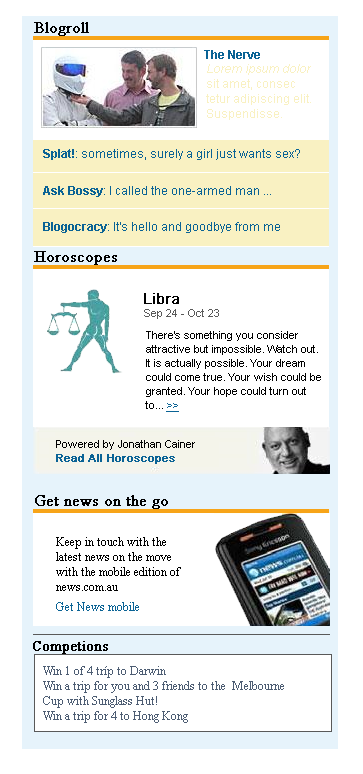
<style>
.page{position:relative;width:363px;height:774px;background:#ffffff}
.page>*{position:absolute;margin:0}
.t1{font:16px "TimesNewRomanPSMT";color:#000000;font-weight:bold}
.t2{font:12px "Arial-BoldMT";color:#0a6395}
.t3{font:12px/15px "ArialMT";color:#f9f1c2}
.t4{font:12px/15px "Arial-ItalicMT";color:#f9f1c2}
.t5{font:12px "ArialMT";color:#0a6395}
.t6{font:15px "ArialMT";color:#000000;font-weight:bold}
.t7{font:11px "ArialMT";color:#595959}
.t8{font:11px/14px "ArialMT";color:#000000}
.t9{font:11px/14px "ArialMT";color:#0a6395;text-decoration:underline}
.t10{font:11px/14px "ArialMT";color:#0a6395;font-weight:bold}
.t11{font:12px/15px "TimesNewRomanPSMT";color:#000000}
.t12{font:12px "TimesNewRomanPSMT";color:#0a6395}
.t13{font:14px "TimesNewRomanPSMT";color:#000000;font-weight:bold}
.t14{font:12px/15px "TimesNewRomanPSMT";color:#4d5d73}
</style>
<div class="page">
<p class="t1" style="left:34px;top:22px;width:55px;height:14px">Blogroll</p>
<p class="t2" style="left:204px;top:50px;width:56px;height:9px">The Nerve</p>
<p class="t3" style="left:206px;top:64px;width:105px;height:56px"><span class="t4">Lorem ipsum dolor <br></span>sit amet, consec<br>tetur adipiscing elit. <br>Suspendisse.</p>
<p class="t5" style="left:43px;top:149px;width:257px;height:11px"><span class="t2">Splat!</span>: sometimes, surely a girl just wants sex?</p>
<p class="t5" style="left:43px;top:186px;width:228px;height:11px"><span class="t2">Ask Bossy</span>: I called the one-armed man ...</p>
<p class="t5" style="left:43px;top:222px;width:237px;height:11px"><span class="t2">Blogocracy</span>: It’s hello and goodbye from me</p>
<p class="t1" style="left:34px;top:251px;width:83px;height:14px">Horoscopes</p>
<p class="t6" style="left:144px;top:293px;width:35px;height:11px">Libra</p>
<p class="t7" style="left:144px;top:309px;width:75px;height:10px">Sep 24 - Oct 23</p>
<p class="t8" style="left:145px;top:331px;width:176px;height:81px">There’s something you consider<br>attractive but impossible. Watch out.<br>It is actually possible. Your dream<br>could come true. Your wish could be<br>granted. Your hope could turn out <br>to... <span class="t9">&gt;&gt;</span></p>
<p class="t8" style="left:56px;top:440px;width:139px;height:24px">Powered by Jonathan Cainer<br><span class="t10">Read All Horoscopes</span></p>
<p class="t1" style="left:35px;top:495px;width:133px;height:14px">Get news on the go</p>
<p class="t11" style="left:56px;top:537px;width:125px;height:54px">Keep in touch with the <br>latest news on the move <br>with the mobile edition of <br>news.com.au</p>
<p class="t12" style="left:56px;top:602px;width:83px;height:9px">Get News mobile</p>
<p class="t13" style="left:33px;top:641px;width:75px;height:13px">Competions</p>
<p class="t14" style="left:43px;top:666px;width:241px;height:57px">Win 1 of 4 tríp to Darwin<br>Win a trip for you and 3 friends to the  Melbourne<br>Cup with Sunglass Hut!<br>Win a trip for 4 to Hong Kong</p>
</div>
